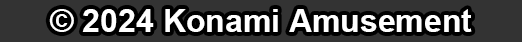
<style>
.page{position:relative;width:522px;height:42px;background:#333333}
.page>*{position:absolute;margin:0}
.t1{font:32px "Arial-BoldMT";color:#ffffff}
</style>
<div class="page">
<p class="t1" style="left:49px;top:9px;width:423px;height:23px">© 2024 Konami Amusement</p>
</div>
